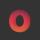
<style>
.page{position:relative;width:40px;height:40px;background:#333333}
.page>*{position:absolute;margin:0}
.t1{font:38px "UTM-American-Sans";scale:1.06 1}
</style>
<div class="page">
<p class="t1" style="left:9px;top:9px;width:22px;height:24px">o</p>
</div>
